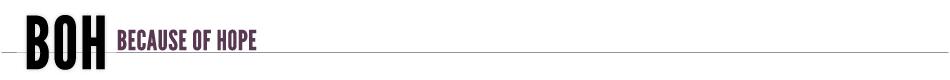
<style>
.page{position:relative;width:950px;height:80px;background:#ffffff}
.page>*{position:absolute;margin:0}
.t1{font:27.2px "LeagueGothic";color:#593951;font-weight:bold}
</style>
<div class="page">
<p class="t1" style="left:117px;top:29px;width:140px;height:22px">BECAUSE OF HOPE</p>
</div>
